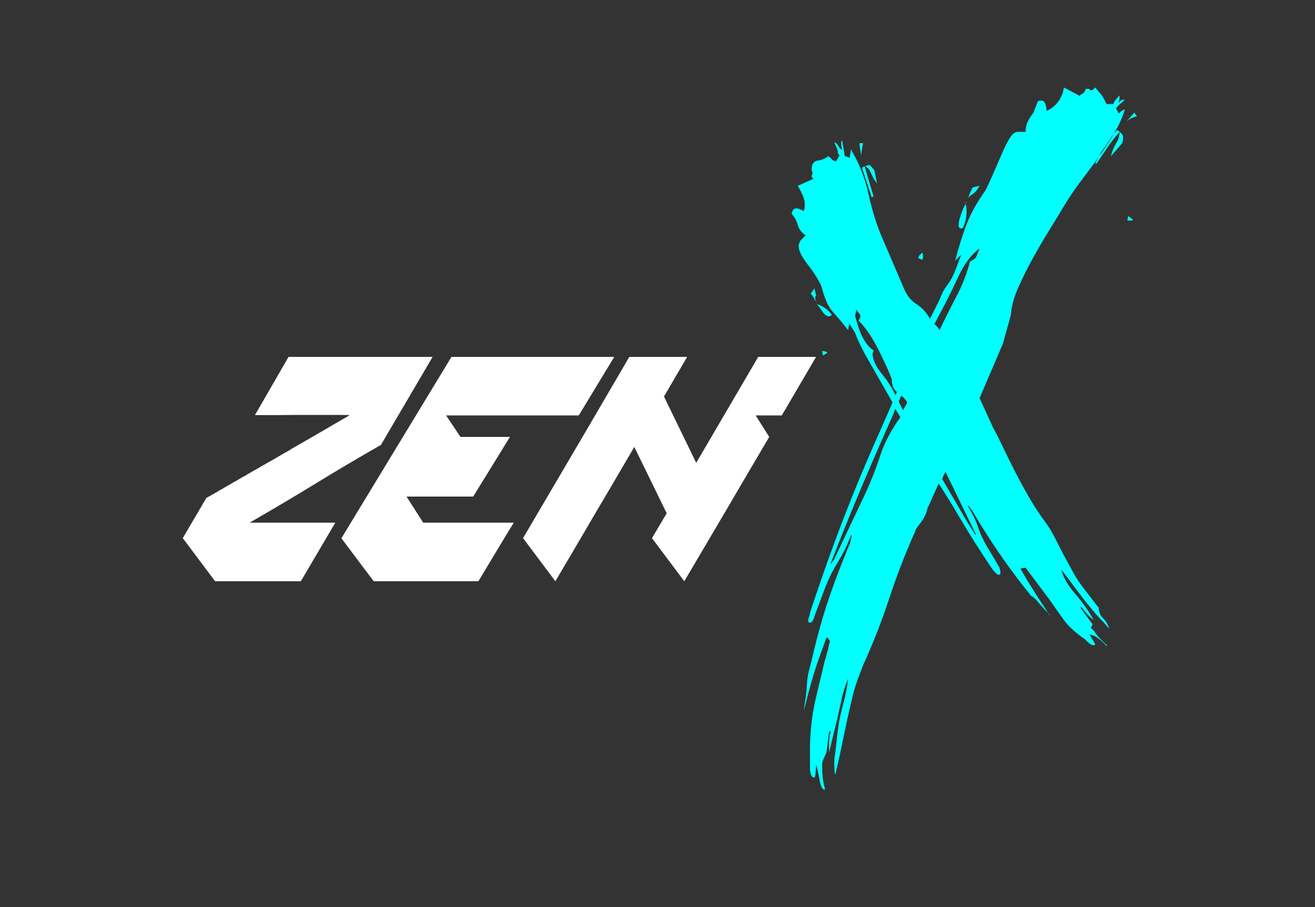
<style>
.page{position:relative;width:1315px;height:907px;background:#333333}
.page>*{position:absolute;margin:0}
.t1{font:869.9px "DHFStoryBrush";color:#00ffff}
.t2{font:339px "SPACEMISSION";color:#ffffff}
</style>
<div class="page">
<p class="t1" style="left:792px;top:87px;width:346px;height:702px">X</p>
<p class="t2" style="left:182px;top:357px;width:634px;height:224px">zen</p>
</div>
